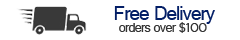
<style>
.page{position:relative;width:240px;height:40px;background:#ffffff}
.page>*{position:absolute;margin:0}
.t1{font:36.1px "Raavi";letter-spacing:-0.05em;color:#031e66}
.t2{font:23.8px "Raavi";letter-spacing:-0.05em;color:#353535}
</style>
<div class="page">
<p class="t1" style="left:114px;top:6px;width:101px;height:18px">Free Delivery</p>
<p class="t2" style="left:119px;top:22px;width:88px;height:11px">orders over $100</p>
</div>
